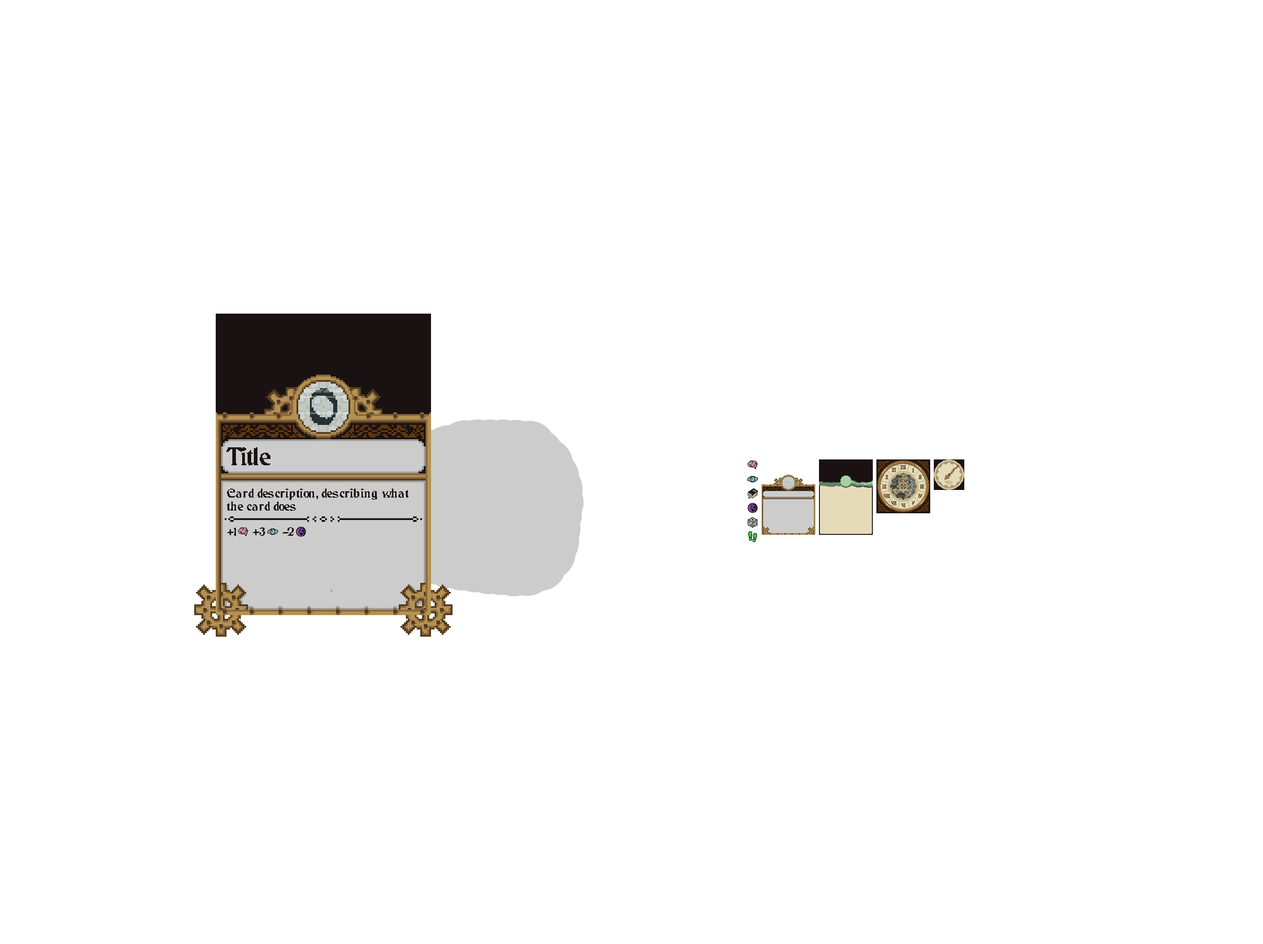
<style>
.page{position:relative;width:1263px;height:944px;background:#ffffff}
.page>*{position:absolute;margin:0}
.t1{font:46.7px "JMHCthulhumbusArcadeUG-Regular";color:#263031}
.t2{font:21.5px "JMHCthulhumbusArcadeUG-Regular";color:#1a1212}
.t3{font:10.8px "JMHCthulhumbusArcadeUG-Regular";color:#1a1212}
</style>
<div class="page">
<p class="t1" style="left:310px;top:388px;width:27px;height:37px">0</p>
<p class="t2" style="left:226px;top:447px;width:45px;height:18px">Title</p>
<p class="t3" style="left:227px;top:489px;width:182px;height:22px">Card description, describing what the card does</p>
<p class="t3" style="left:227px;top:528px;width:9px;height:8px">+1</p>
<p class="t3" style="left:253px;top:527px;width:12px;height:9px">+3</p>
<p class="t3" style="left:283px;top:527px;width:11px;height:9px">-2</p>
</div>
